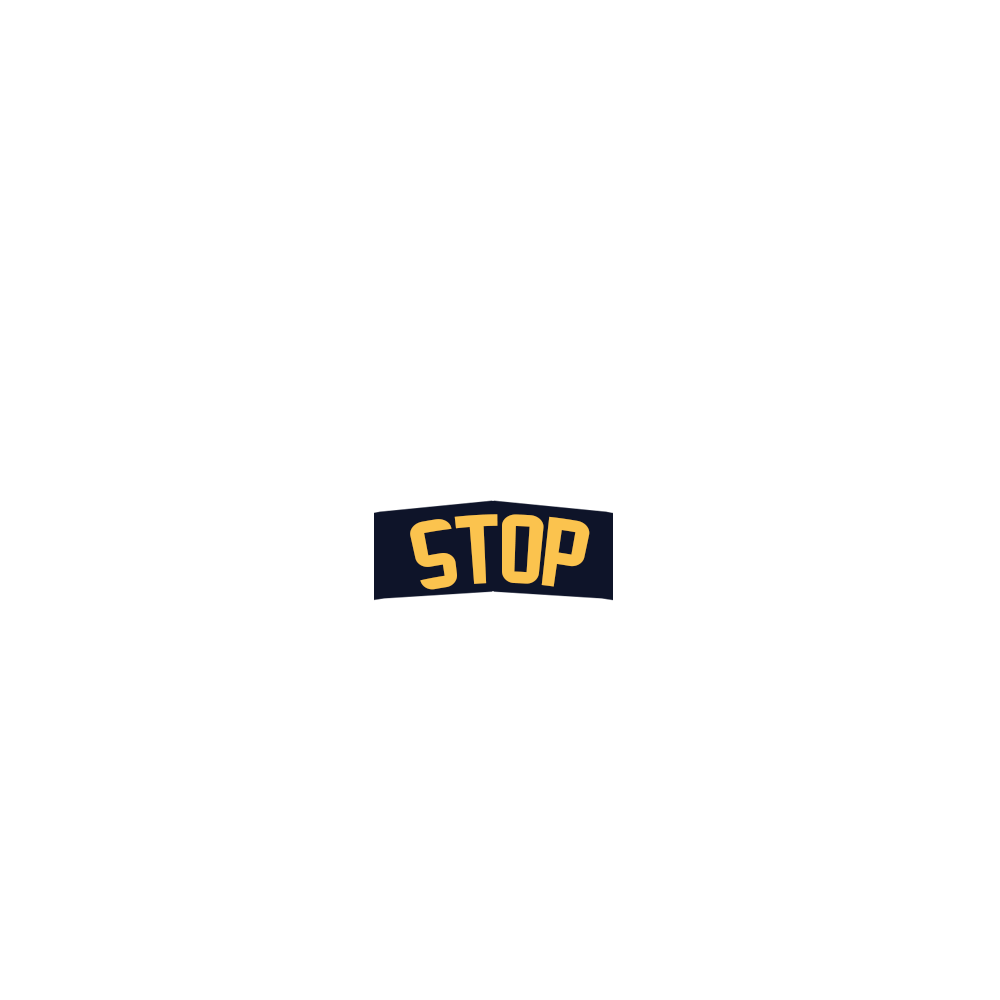
<style>
.page{position:relative;width:1000px;height:1000px;background:#ffffff}
.page>*{position:absolute;margin:0}
.t1{font:78.3px "ZAPPATBlack";color:#fbc34e}
</style>
<div class="page">
<p class="t1" style="left:410px;top:514px;width:180px;height:76px">stop</p>
</div>
